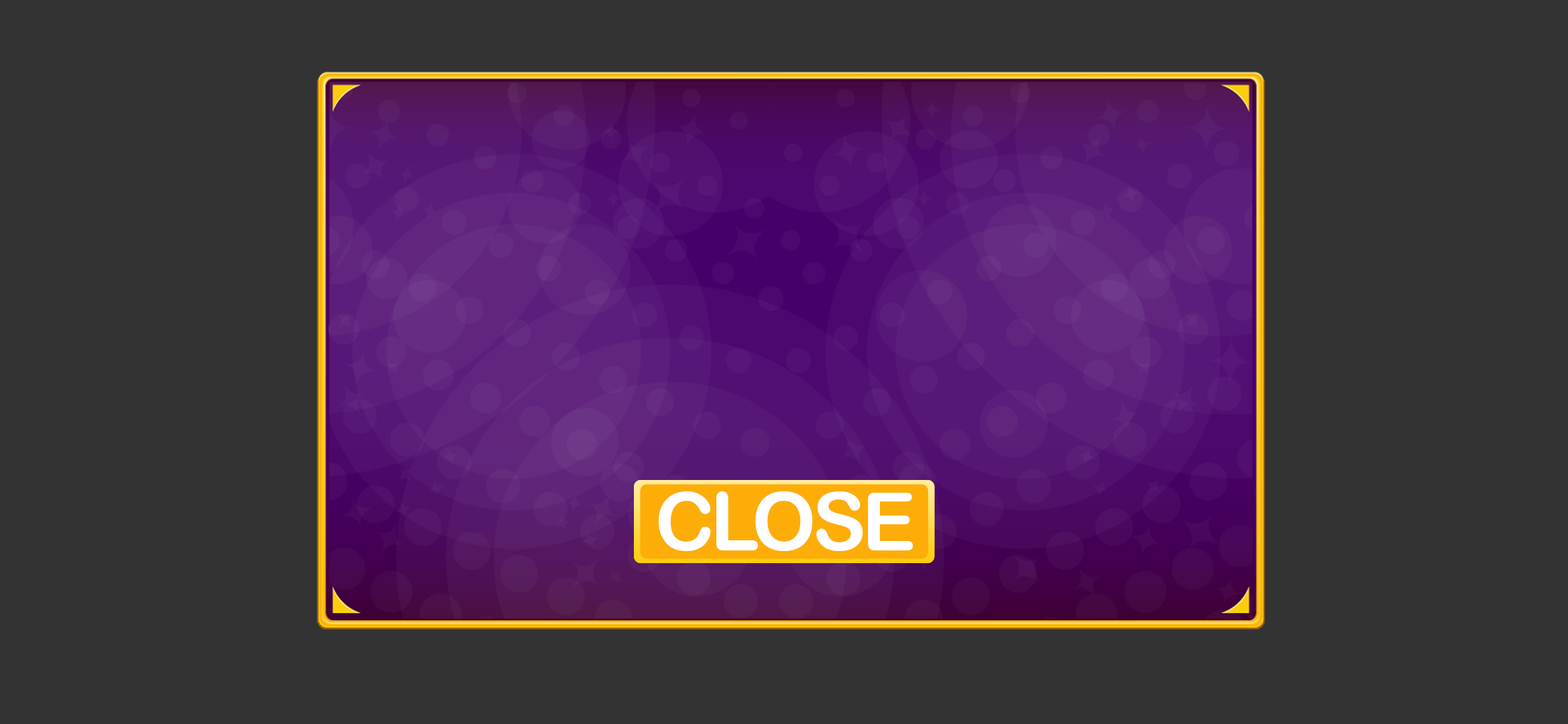
<style>
.page{position:relative;width:1568px;height:724px;background:#333333}
.page>*{position:absolute;margin:0}
.t1{font:81.3px "ArialRoundedMTBold";letter-spacing:-0.05em;color:#ffffff;text-transform:uppercase}
</style>
<div class="page">
<p class="t1" style="left:659px;top:491px;width:254px;height:60px">CLOSE</p>
<p class="t1" style="left:659px;top:491px;width:254px;height:60px">CLOSE</p>
<p class="t1" style="left:659px;top:491px;width:254px;height:60px">CLOSE</p>
</div>
